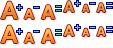
<style>
.page{position:relative;width:113px;height:48px;background:#ffffff}
.page>*{position:absolute;margin:0}
.t1{font:24px "Arial-BoldMT";color:#e68c39}
.t2{font:19px "Arial-BoldMT";color:#e68c39}
.t3{font:15px "Arial-BoldMT";color:#e68c39}
.t4{font:10px "Arial-BoldMT";color:#e68c39}
.t5{font:12px "Arial-BoldMT";color:#e68c39}
.t6{font:14px "Arial-BoldMT";color:#e68c39}
.t7{font:24px "Arial-BoldMT"}
.t8{font:19px "Arial-BoldMT"}
.t9{font:15px "Arial-BoldMT";color:#ff9b31}
.t10{font:10px "Arial-BoldMT";color:#ffa237}
.t11{font:12px "Arial-BoldMT";color:#ffa337}
.t12{font:14px "Arial-BoldMT"}
</style>
<div class="page">
<p class="t1" style="left:1px;top:1px;width:17px;height:18px">A</p>
<p class="t2" style="left:41px;top:5px;width:14px;height:14px">A</p>
<p class="t3" style="left:63px;top:1px;width:11px;height:11px">A</p>
<p class="t4" style="left:82px;top:4px;width:8px;height:8px">A</p>
<p class="t5" style="left:97px;top:3px;width:9px;height:9px">A</p>
<p class="t6" style="left:24px;top:9px;width:10px;height:10px">A</p>
<p class="t7" style="left:1px;top:25px;width:17px;height:18px">A</p>
<p class="t8" style="left:41px;top:29px;width:14px;height:14px">A</p>
<p class="t9" style="left:63px;top:25px;width:11px;height:11px">A</p>
<p class="t10" style="left:82px;top:28px;width:8px;height:8px">A</p>
<p class="t11" style="left:97px;top:27px;width:9px;height:9px">A</p>
<p class="t12" style="left:24px;top:33px;width:10px;height:10px">A</p>
</div>
